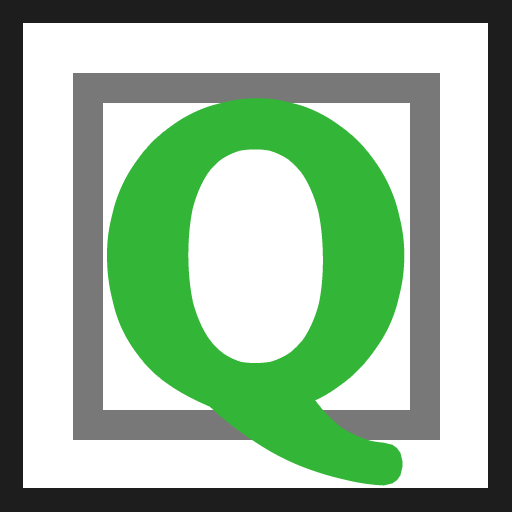
<style>
.page{position:relative;width:512px;height:512px;background:#ffffff}
.page>*{position:absolute;margin:0}
.t1{font:600px "Microsoft-Himalaya";color:#33b638}
</style>
<div class="page">
<p class="t1" style="left:125px;top:116px;width:262px;height:352px">Q</p>
</div>
